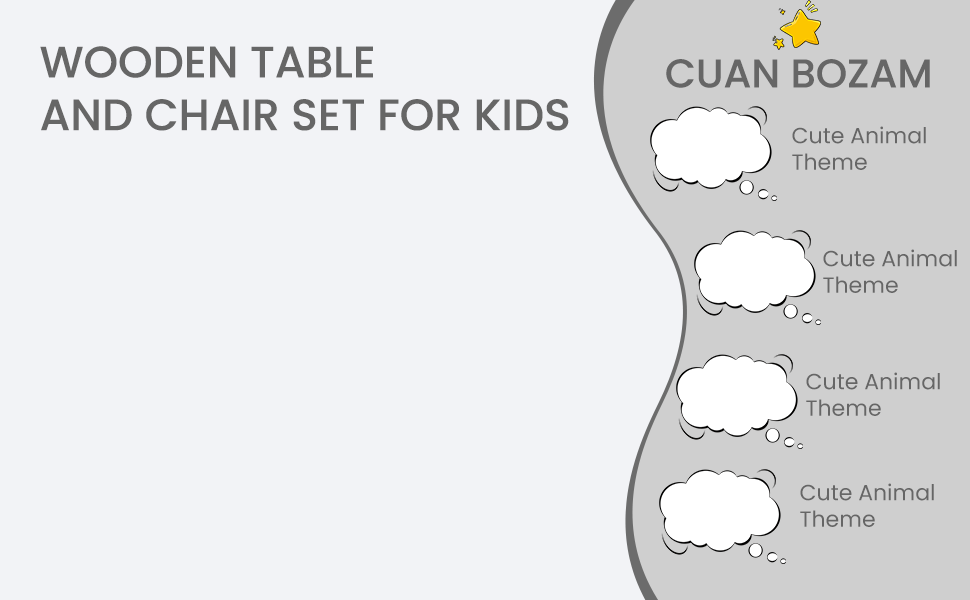
<style>
.page{position:relative;width:970px;height:600px;background:#f2f3f6}
.page>*{position:absolute;margin:0}
.t1{font:44px "Poppins-Medium";color:#666666}
.t2{font:40px "Poppins-Medium";color:#666666}
.t3{font:22px "Poppins-Regular";color:#666666}
</style>
<div class="page">
<p class="t1" style="left:40px;top:46px;width:529px;height:85px">WOODEN TABLE<br>AND CHAIR SET FOR KIDS</p>
<p class="t2" style="left:666px;top:59px;width:264px;height:29px">CUAN BOZAM</p>
<p class="t3" style="left:792px;top:126px;width:134px;height:44px">Cute Animal <br>Theme</p>
<p class="t3" style="left:823px;top:249px;width:134px;height:44px">Cute Animal <br>Theme</p>
<p class="t3" style="left:806px;top:372px;width:134px;height:44px">Cute Animal <br>Theme</p>
<p class="t3" style="left:800px;top:483px;width:134px;height:44px">Cute Animal <br>Theme</p>
</div>
